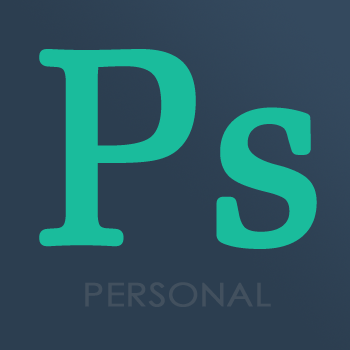
<style>
.page{position:relative;width:350px;height:350px;background:#2c3e50}
.page>*{position:absolute;margin:0}
.t1{font:275.4px "ZapfElliptical711BT-Roman";color:#1abc9c;font-weight:bold}
.t2{font:32.1px "LevenimMT";color:#42505e;font-weight:bold;scale:1.12 1}
</style>
<div class="page">
<p class="t1" style="left:39px;top:49px;width:278px;height:200px">Ps</p>
<p class="t2" style="left:85px;top:282px;width:186px;height:25px">PERSONAL</p>
</div>
